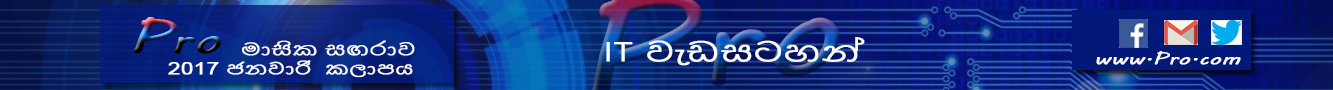
<style>
.page{position:relative;width:1333px;height:90px}
.page>*{position:absolute;margin:0}
.t1{font:35.9px "MVBoli";font-weight:bold;scale:1.38 1}
.t2{font:44.8px "MVBoli";font-weight:bold;scale:1.38 1}
.t3{font:17px "NirmalaUI-Semilight";color:#fdfdfd;font-weight:bold;scale:1.38 1}
.t4{font:27px "NirmalaUI-Semilight";color:#fdfdfd;font-weight:bold;scale:1.38 1}
.t5{font:16px "MVBoli";color:#fdfdfd;font-weight:bold;scale:1.38 1}
.t6{font:16px "NirmalaUI-Semilight";color:#fdfdfd;font-weight:bold;scale:1.38 1}
.t7{font:16px "ArialMT";color:#fdfdfd;font-weight:bold;scale:1.38 1}
</style>
<div class="page">
<p class="t1" style="left:133px;top:17px;width:88px;height:37px"><span class="t2">P</span>ro</p>
<p class="t3" style="left:242px;top:40px;width:173px;height:16px">මාසික සඟරාව</p>
<p class="t4" style="left:606px;top:37px;width:259px;height:29px">IT වැඩසටහන්</p>
<p class="t5" style="left:1096px;top:51px;width:145px;height:14px">www.Pro.com</p>
<p class="t6" style="left:168px;top:60px;width:245px;height:18px"><span class="t7">2017 </span>ජනවාරි  කලාපය</p>
</div>
